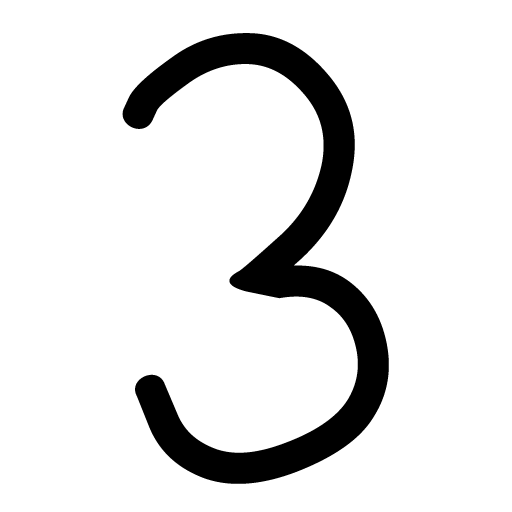
<style>
.page{position:relative;width:512px;height:512px;background:#ffffff}
.page>*{position:absolute;margin:0}
.t1{font:770px "RiseStarHand";color:#000000}
</style>
<div class="page">
<p class="t1" style="left:122px;top:33px;width:267px;height:451px">3</p>
</div>
